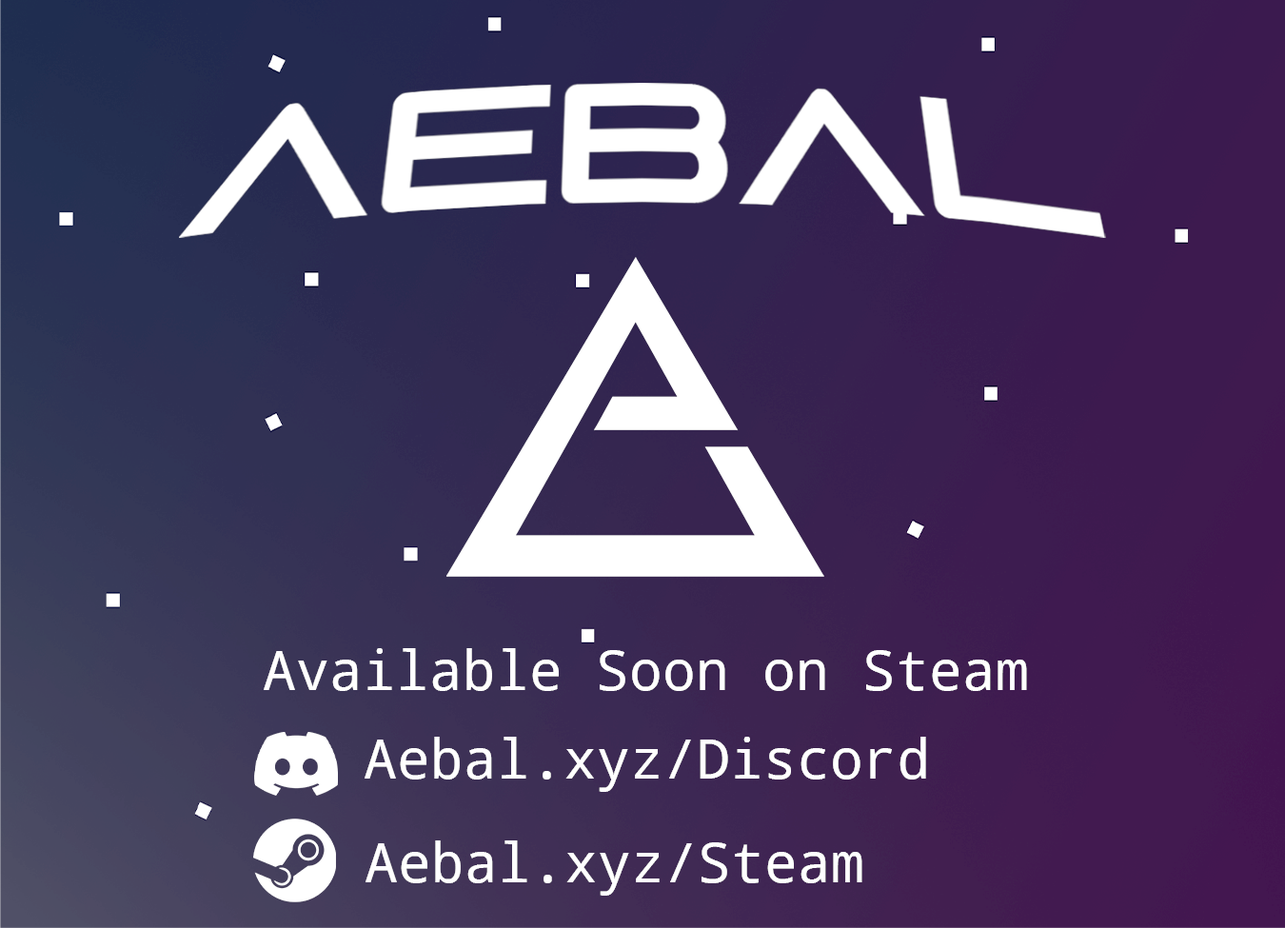
<style>
.page{position:relative;width:1285px;height:928px}
.page>*{position:absolute;margin:0}
.t1{font:55.5px "NotoMono";color:#ffffff}
</style>
<div class="page">
<p class="t1" style="left:264px;top:648px;width:763px;height:43px">Available Soon on Steam</p>
<p class="t1" style="left:365px;top:737px;width:561px;height:55px">Aebal.xyz/Discord</p>
<p class="t1" style="left:365px;top:840px;width:497px;height:56px">Aebal.xyz/Steam</p>
</div>
